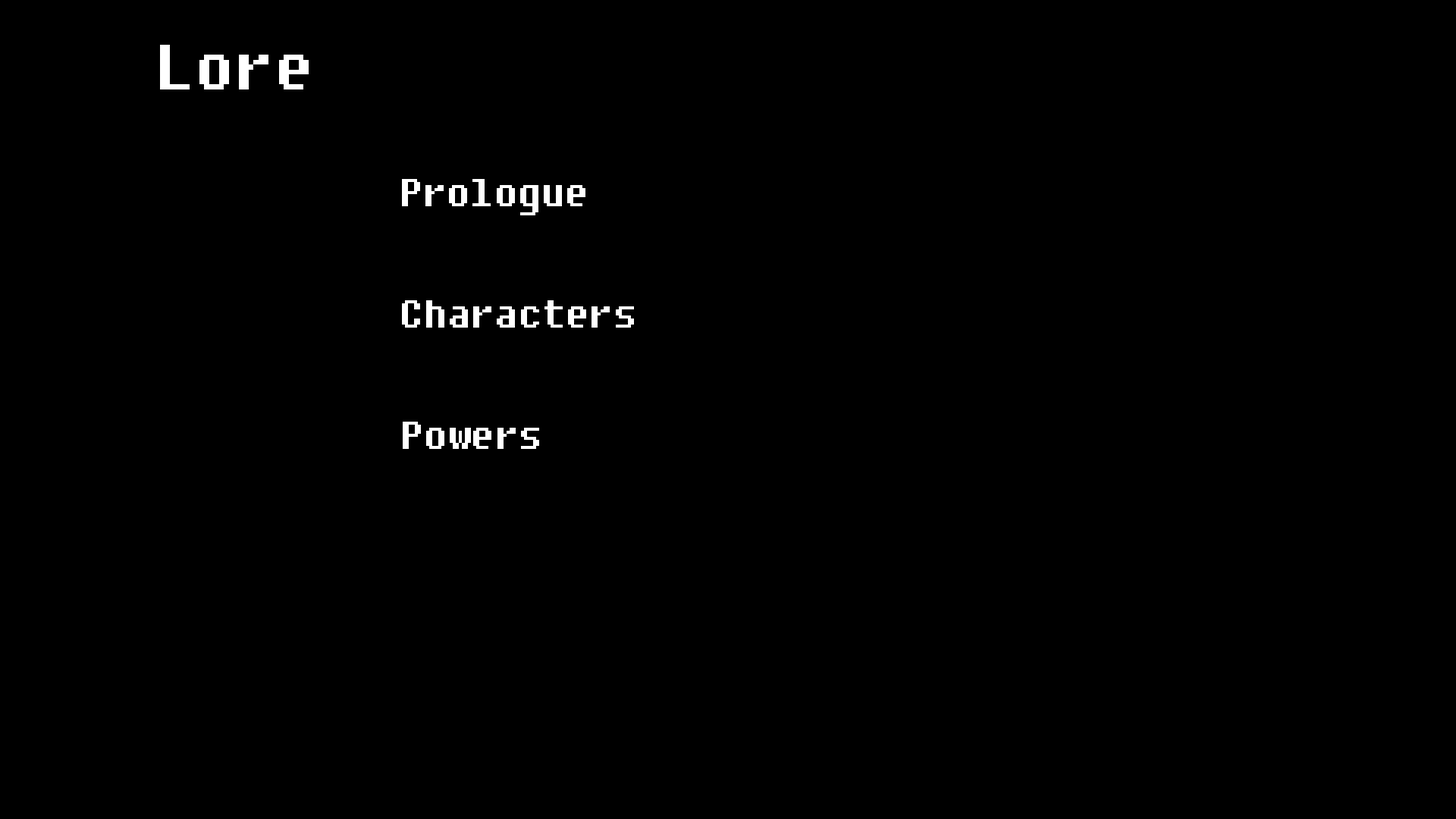
<style>
.page{position:relative;width:1456px;height:819px;background:#000000}
.page>*{position:absolute;margin:0}
.t1{font:63.2px "Fixedsys";color:#ffffff}
.t2{font:37.9px "Fixedsys";color:#ffffff}
</style>
<div class="page">
<p class="t1" style="left:160px;top:45px;width:149px;height:44px">Lore</p>
<p class="t2" style="left:402px;top:179px;width:183px;height:36px">Prologue</p>
<p class="t2" style="left:402px;top:300px;width:232px;height:28px">Characters</p>
<p class="t2" style="left:403px;top:422px;width:136px;height:27px">Powers</p>
</div>
